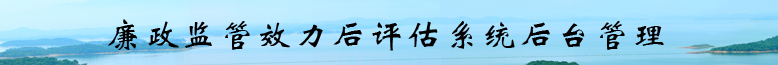
<style>
.page{position:relative;width:778px;height:65px}
.page>*{position:absolute;margin:0}
.t1{font:33.3px "STXinwei";letter-spacing:0.05em;color:#020000;scale:1.07 1}
</style>
<div class="page">
<p class="t1" style="left:108px;top:19px;width:556px;height:32px">廉政监管效力后评估系统后台管理</p>
</div>
